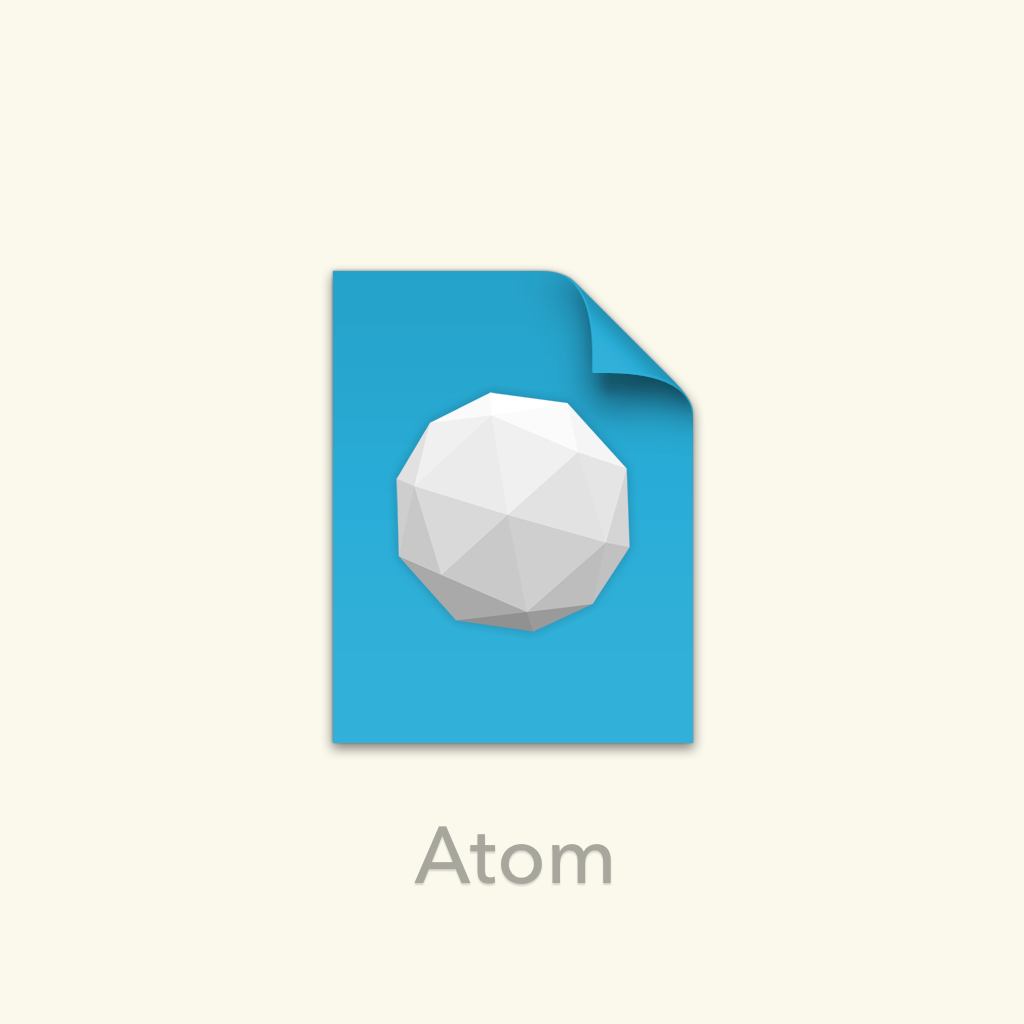
<style>
.page{position:relative;width:1024px;height:1024px;background:#fbf9ec}
.page>*{position:absolute;margin:0}
.t1{font:80px "AvenirNext-Medium";color:#a8a79e}
</style>
<div class="page">
<p class="t1" style="left:414px;top:826px;width:197px;height:58px">Atom</p>
</div>
